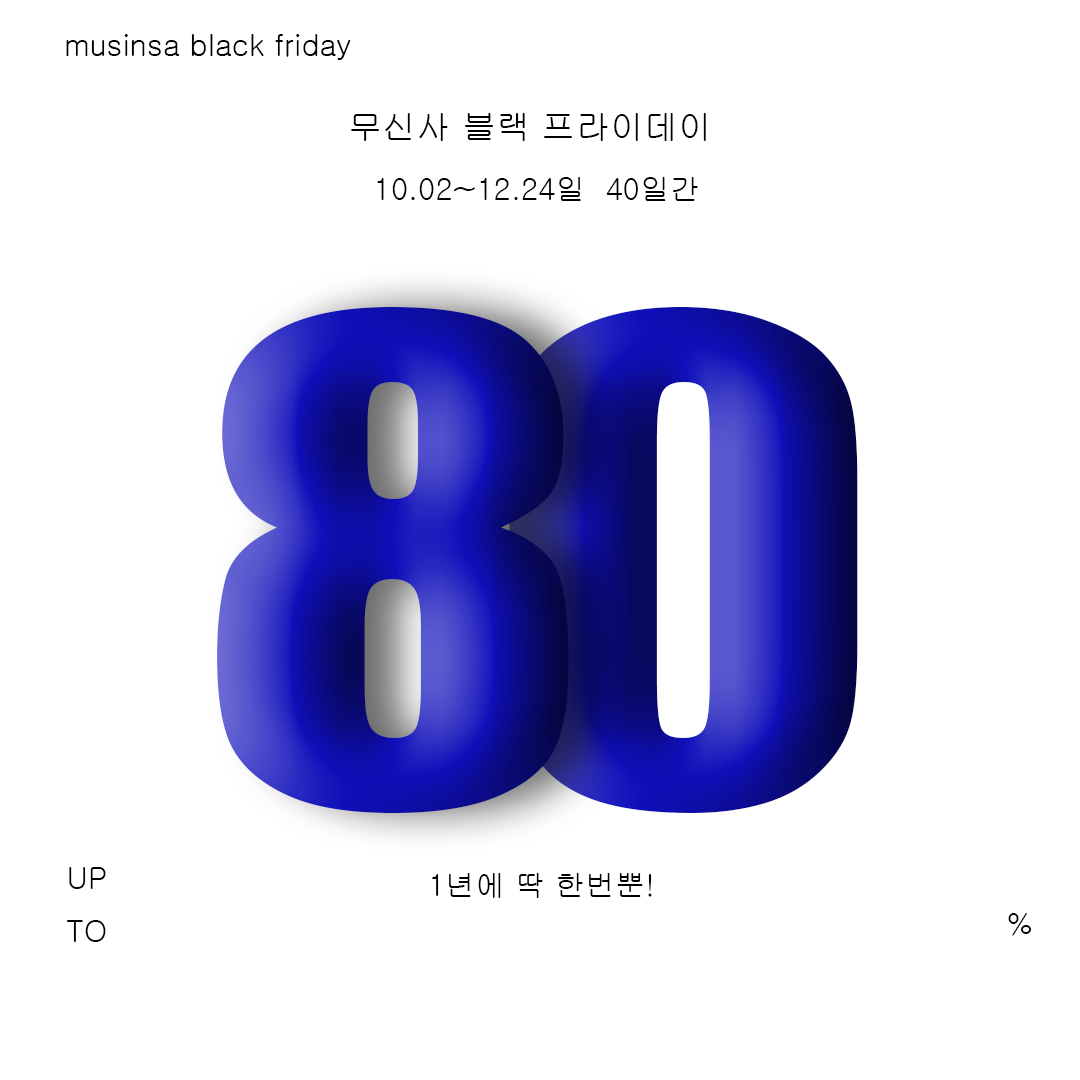
<style>
.page{position:relative;width:1080px;height:1080px;background:#ffffff}
.page>*{position:absolute;margin:0}
.t1{font:30px "Gulim";color:#000000}
.t2{font:34.1px "Gulim";color:#000000}
.t3{font:617.3px "Impact";scale:1.21 1}
</style>
<div class="page">
<p class="t1" style="left:66px;top:34px;width:285px;height:26px">musinsa black friday</p>
<p class="t2" style="left:351px;top:113px;width:355px;height:28px">무신사 블랙 프라이데이</p>
<p class="t1" style="left:377px;top:177px;width:321px;height:24px">10.02~12.24일  40일간</p>
<p class="t3" style="left:217px;top:307px;width:352px;height:506px">8</p>
<p class="t3" style="left:509px;top:307px;width:349px;height:506px">0</p>
<p class="t1" style="left:67px;top:867px;width:39px;height:75px;text-align:justify">UP<br>TO</p>
<p class="t1" style="left:432px;top:873px;width:220px;height:25px">1년에 딱 한번뿐!</p>
<p class="t1" style="left:1008px;top:913px;width:24px;height:23px">%</p>
</div>
